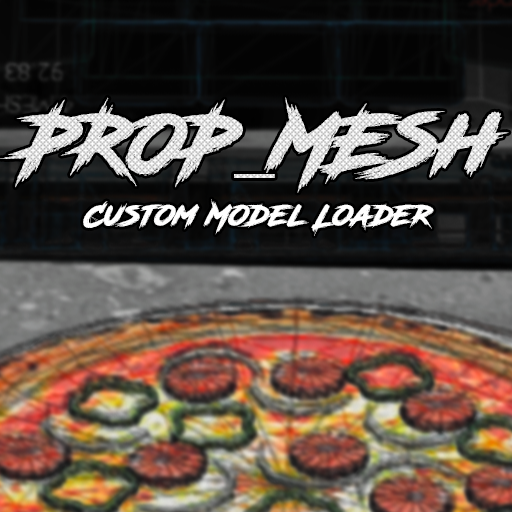
<style>
.page{position:relative;width:512px;height:512px}
.page>*{position:absolute;margin:0}
.t1{font:80.9px "RoadRage"}
.t2{font:80.9px "MyriadPro-Regular"}
.t3{font:30px "RoadRage";color:#ffffff}
</style>
<div class="page">
<p class="t1" style="left:0px;top:97px;width:509px;height:96px">PROP<span class="t2">_</span>MESh</p>
<p class="t3" style="left:83px;top:199px;width:351px;height:37px">Custom Model Loader</p>
</div>
